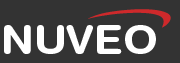
<style>
.page{position:relative;width:180px;height:63px;background:#333333}
.page>*{position:absolute;margin:0}
.t1{font:39px "HelveticaRoundedLTStd-Bd";color:#ffffff;scale:1.08 1}
</style>
<div class="page">
<p class="t1" style="left:4px;top:25px;width:152px;height:29px">NUVEO</p>
</div>
